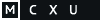
<style>
.page{position:relative;width:100px;height:20px;background:#0e1215}
.page>*{position:absolute;margin:0}
.t1{font:12px "PTSans-Caption";letter-spacing:-0.04em;color:#ffffff;font-weight:bold}
</style>
<div class="page">
<p class="t1" style="left:29px;top:5px;width:8px;height:10px">C</p>
<p class="t1" style="left:49px;top:5px;width:9px;height:10px">X</p>
<p class="t1" style="left:69px;top:5px;width:8px;height:10px">U</p>
</div>
